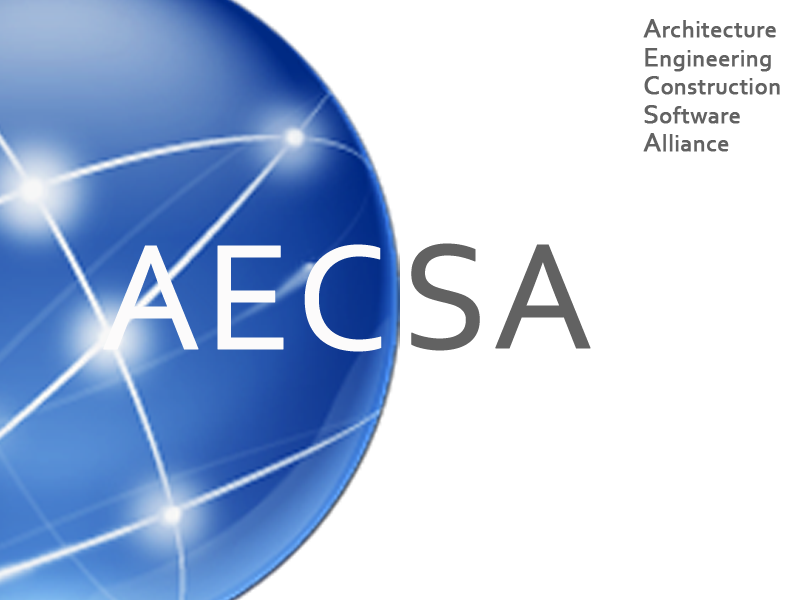
<style>
.page{position:relative;width:800px;height:600px;background:#ffffff}
.page>*{position:absolute;margin:0}
.t1{font:24px/24px "Corbel";color:#626262;font-weight:bold}
.t2{font:28px/24px "Corbel";color:#626262;font-weight:bold}
.t3{font:157.4px "Corbel";color:#fcfbfb;font-weight:bold}
.t4{font:157.4px "Corbel";color:#626262;font-weight:bold}
</style>
<div class="page">
<p class="t1" style="left:643px;top:19px;width:137px;height:133px"><span class="t2">A</span>rchitecture<br><span class="t2">E</span>ngineering<br><span class="t2">C</span>onstruction<br><span class="t2">S</span>oftware<br><span class="t2">A</span>lliance</p>
<p class="t3" style="left:103px;top:244px;width:279px;height:108px">AEC</p>
<p class="t4" style="left:411px;top:243px;width:180px;height:108px">SA</p>
</div>
